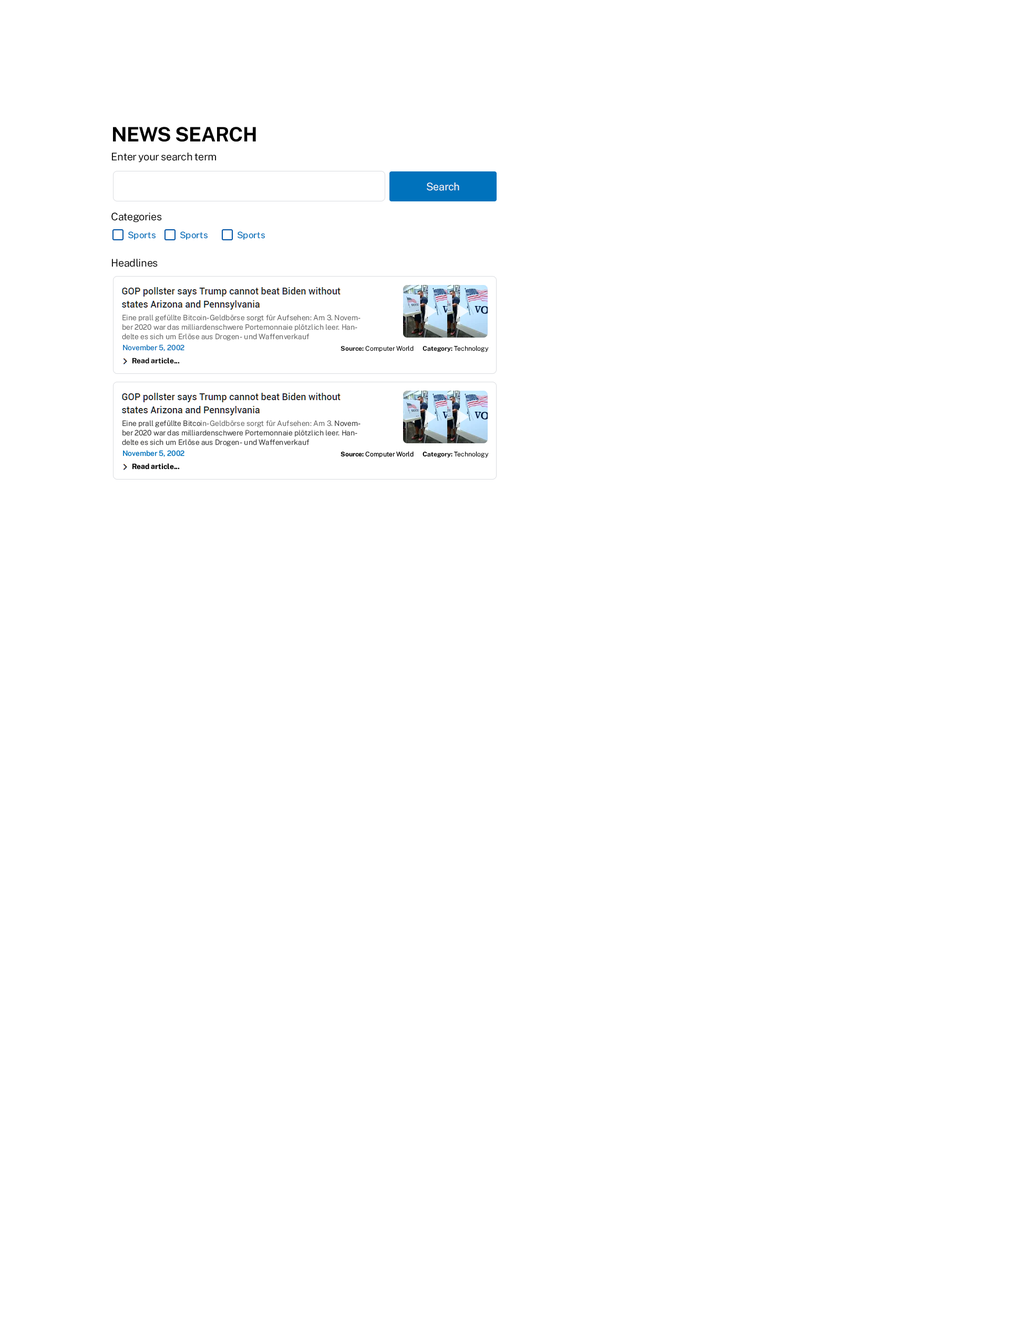
<style>
.page{position:relative;width:1009px;height:1324px;background:#ffffff}
.page>*{position:absolute;margin:0}
.t1{font:19.9px "PublicSans-Bold";letter-spacing:-0.02em;color:#000000;text-transform:uppercase}
.t2{font:10.5px "PublicSans-Regular";letter-spacing:-0.02em;color:#000000}
.t3{font:10.5px "PublicSans-Regular";letter-spacing:-0.02em;color:#f6f6f6}
.t4{font:9px "PublicSans-Medium";color:#0072bc}
.t5{font:7.4px/9.5px "PublicSans-Light";color:#616161}
.t6{font:7.4px "PublicSans-Medium";color:#0072bc}
.t7{font:6.4px "PublicSans-Light";color:#000000}
.t8{font:6.4px "PublicSans-Bold";color:#000000}
.t9{font:7.4px "PublicSans-Bold";color:#000000}
</style>
<div class="page">
<p class="t1" style="left:113px;top:127px;width:143px;height:15px">NewS SEARCH</p>
<p class="t2" style="left:112px;top:152px;width:104px;height:10px">Enter your search term</p>
<p class="t3" style="left:427px;top:182px;width:32px;height:9px">Search</p>
<p class="t2" style="left:111px;top:212px;width:51px;height:10px">Categories</p>
<p class="t4" style="left:128px;top:231px;width:28px;height:9px">Sports</p>
<p class="t4" style="left:180px;top:231px;width:28px;height:9px">Sports</p>
<p class="t4" style="left:238px;top:231px;width:27px;height:9px">Sports</p>
<p class="t2" style="left:112px;top:259px;width:46px;height:8px">Headlines</p>
<p class="t5" style="left:122px;top:314px;width:239px;height:27px">Eine prall gefüllte Bitcoin-Geldbörse sorgt für Aufsehen: Am 3. November 2020 war das milliardenschwere Portemonnaie plötzlich leer. Handelte es sich um Erlöse aus Drogen- und Waffenverkauf</p>
<p class="t6" style="left:123px;top:344px;width:62px;height:7px">November 5, 2002</p>
<p class="t7" style="left:341px;top:345px;width:73px;height:7px"><span class="t8">Source: </span>Computer World</p>
<p class="t7" style="left:423px;top:345px;width:66px;height:7px"><span class="t8">Category: </span>Technology</p>
<p class="t9" style="left:132px;top:357px;width:48px;height:7px">Read article...</p>
</div>
